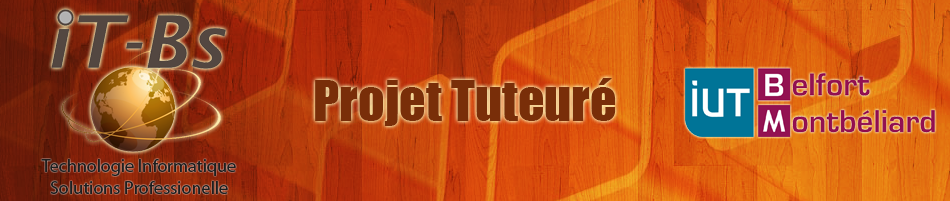
<style>
.page{position:relative;width:950px;height:201px}
.page>*{position:absolute;margin:0}
.t1{font:52px "Impact";color:#792e09}
.t2{font:18px "MyriadPro-Regular";color:#1e1e1e}
</style>
<div class="page">
<p class="t1" style="left:315px;top:78px;width:301px;height:48px">Projet Tuteuré</p>
<p class="t2" style="left:41px;top:159px;width:195px;height:35px;text-align:center">Technologie Informatique<br>Solutions Professionelle</p>
</div>
